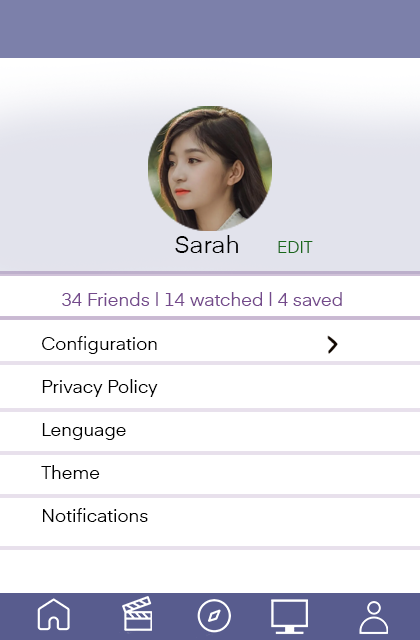
<style>
.page{position:relative;width:420px;height:640px;background:#ffffff}
.page>*{position:absolute;margin:0}
.t1{font:24px "Eina01-Regular";color:#000000}
.t2{font:16px "Eina01-Regular";color:#19681b}
.t3{font:18px "Eina01-Regular";color:#744a8c}
.t4{font:18px "Eina01-Regular";color:#000000}
</style>
<div class="page">
<p class="t1" style="left:175px;top:235px;width:138px;height:18px">Sarah      <span class="t2">EDIT</span></p>
<p class="t3" style="left:62px;top:292px;width:280px;height:14px">34 Friends | 14 watched | 4 saved</p>
<p class="t4" style="left:41px;top:336px;width:117px;height:186px">Configuration<br><br>Privacy Policy <br><br>Lenguage<br><br>Theme<br><br>Notifications</p>
</div>
